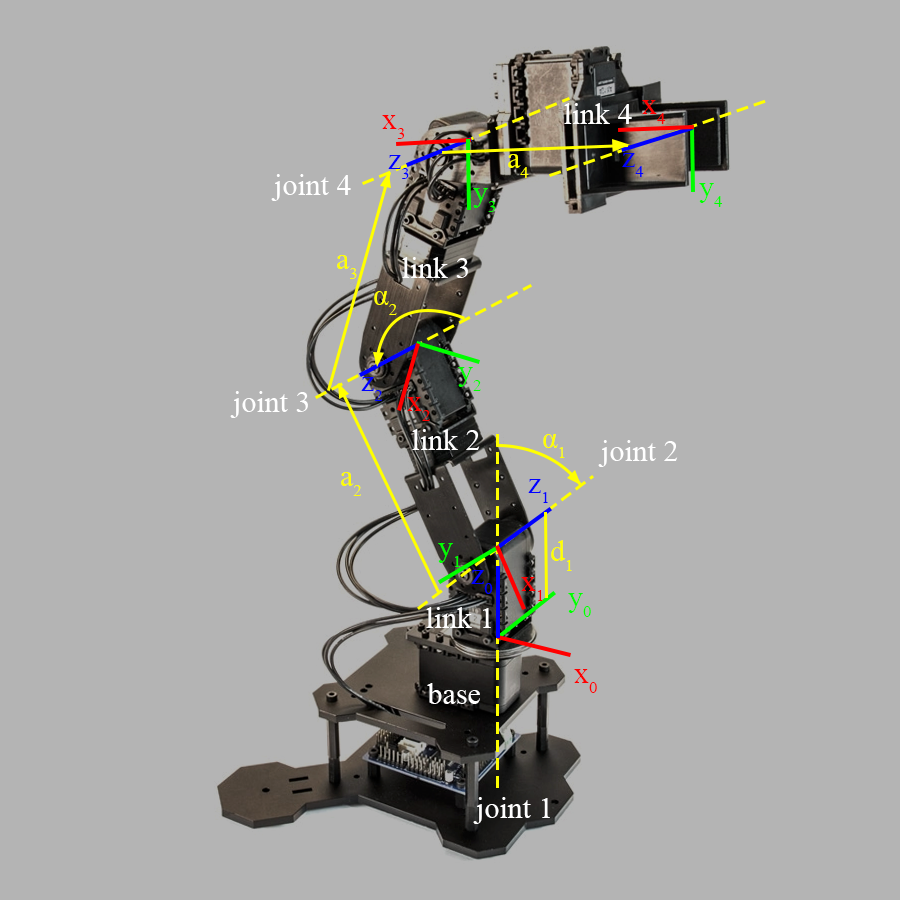
<style>
.page{position:relative;width:900px;height:900px;background:#b4b4b4}
.page>*{position:absolute;margin:0}
.t1{font:30px "TimesNewRomanPSMT";color:#fe0100}
.t2{font:30px "TimesNewRomanPSMT";color:#ffffff}
.t3{font:30px "TimesNewRomanPSMT";color:#ff0001}
.t4{font:30px "TimesNewRomanPSMT";color:#0000ff}
.t5{font:30px "TimesNewRomanPSMT";color:#fffe00}
.t6{font:30px "TimesNewRomanPSMT";color:#00ff01}
.t7{font:30px "TimesNewRomanPSMT";color:#ffff00}
.t8{font:30px "TimesNewRomanPSMT";color:#ff0000}
.t9{font:30px "TimesNewRomanPSMT";color:#00ff00}
.t10{font:30px "TimesNewRomanPSMT";color:#fe0101}
</style>
<div class="page">
<p class="t1" style="left:642px;top:100px;width:24px;height:24px">x4</p>
<p class="t2" style="left:564px;top:103px;width:68px;height:21px">link 4</p>
<p class="t3" style="left:382px;top:115px;width:23px;height:24px">x3</p>
<p class="t4" style="left:388px;top:155px;width:21px;height:24px">z3</p>
<p class="t5" style="left:508px;top:154px;width:21px;height:24px">a4</p>
<p class="t4" style="left:622px;top:153px;width:22px;height:24px">z4</p>
<p class="t2" style="left:271px;top:174px;width:80px;height:27px">joint 4</p>
<p class="t6" style="left:699px;top:183px;width:24px;height:24px">y4</p>
<p class="t6" style="left:473px;top:188px;width:23px;height:24px">y3</p>
<p class="t7" style="left:337px;top:255px;width:20px;height:24px">a3</p>
<p class="t2" style="left:402px;top:257px;width:66px;height:21px">link 3</p>
<p class="t7" style="left:374px;top:291px;width:23px;height:24px">α2</p>
<p class="t4" style="left:361px;top:377px;width:21px;height:24px">z2</p>
<p class="t6" style="left:458px;top:367px;width:23px;height:24px">y2</p>
<p class="t2" style="left:230px;top:391px;width:78px;height:27px">joint 3</p>
<p class="t8" style="left:407px;top:397px;width:23px;height:24px">x2</p>
<p class="t2" style="left:412px;top:429px;width:68px;height:21px">link 2</p>
<p class="t7" style="left:543px;top:434px;width:22px;height:24px">α1</p>
<p class="t2" style="left:598px;top:440px;width:80px;height:27px">joint 2</p>
<p class="t7" style="left:341px;top:472px;width:20px;height:24px">a2</p>
<p class="t4" style="left:528px;top:479px;width:20px;height:24px">z1</p>
<p class="t6" style="left:438px;top:543px;width:22px;height:24px">y1</p>
<p class="t7" style="left:551px;top:540px;width:21px;height:31px">d1</p>
<p class="t4" style="left:471px;top:570px;width:22px;height:24px">z0</p>
<p class="t3" style="left:521px;top:577px;width:22px;height:24px">x1</p>
<p class="t9" style="left:568px;top:593px;width:23px;height:24px">y0</p>
<p class="t2" style="left:426px;top:607px;width:65px;height:21px">link 1</p>
<p class="t10" style="left:574px;top:669px;width:23px;height:24px">x0</p>
<p class="t2" style="left:427px;top:683px;width:53px;height:21px">base</p>
<p class="t2" style="left:473px;top:797px;width:77px;height:27px">joint 1</p>
</div>
